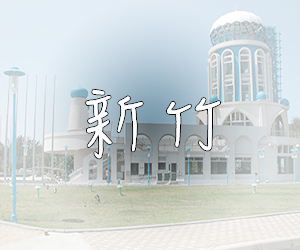
<style>
.page{position:relative;width:300px;height:250px}
.page>*{position:absolute;margin:0}
.t1{font:79px "DFHsiu-W3-WIN-BF";color:#fcfbfa}
</style>
<div class="page">
<p class="t1" style="left:86px;top:89px;width:134px;height:70px">新竹</p>
</div>
